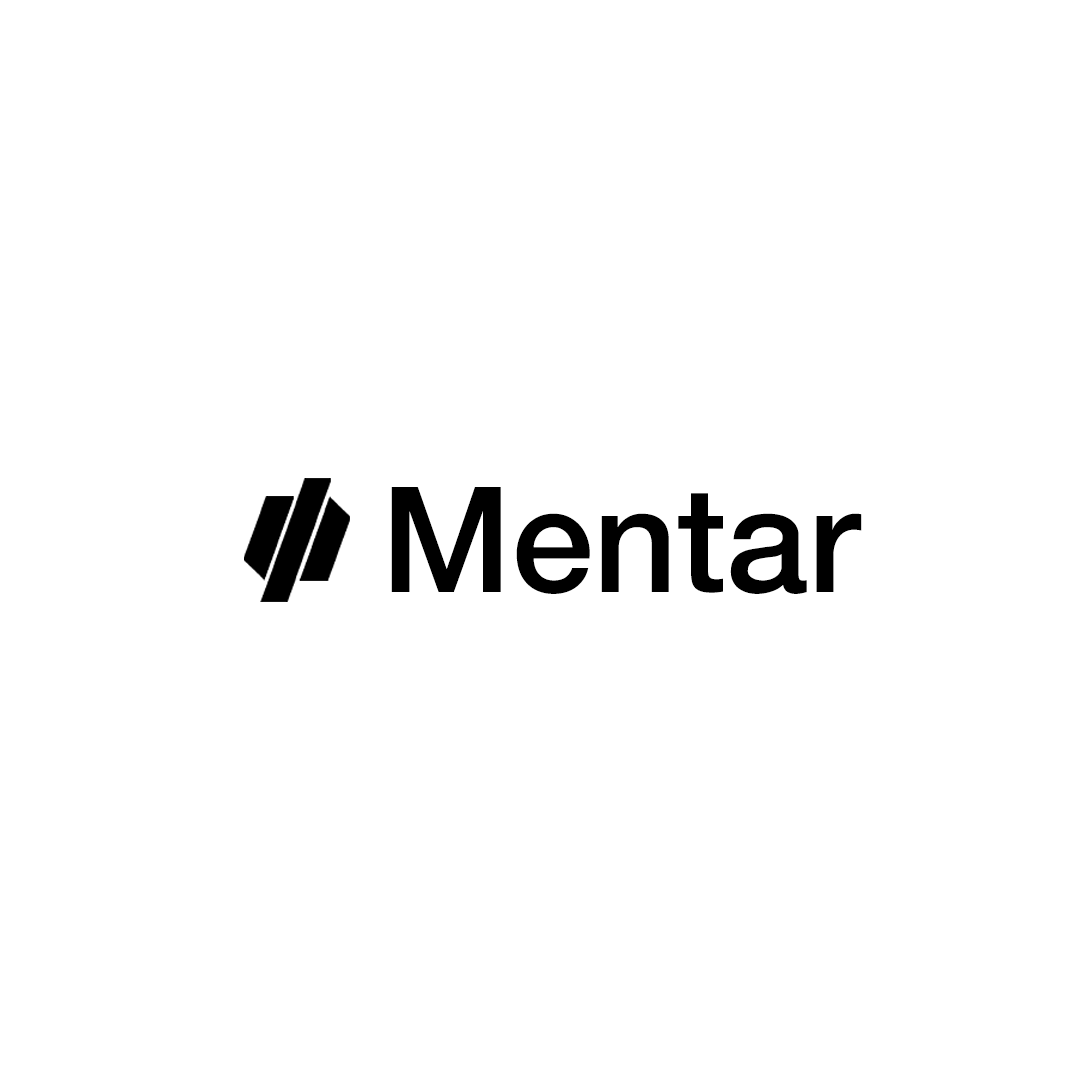
<style>
.page{position:relative;width:1080px;height:1080px;background:#ffffff}
.page>*{position:absolute;margin:0}
.t1{font:146.7px "HelveticaNeue-Medium";color:#000000}
</style>
<div class="page">
<p class="t1" style="left:391px;top:487px;width:471px;height:107px">Mentar</p>
</div>
